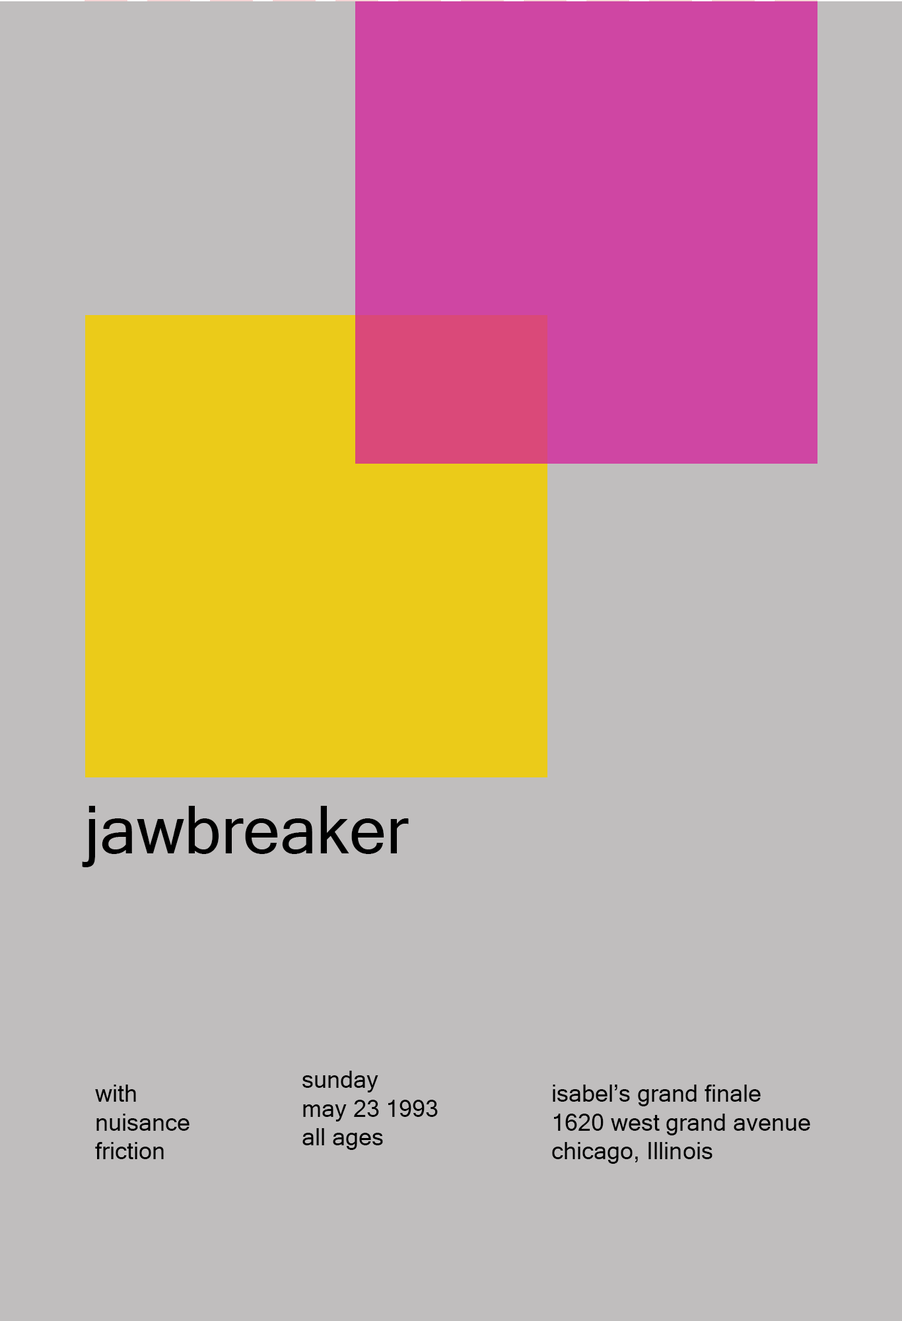
<style>
.page{position:relative;width:902px;height:1321px;background:#c0bebe}
.page>*{position:absolute;margin:0}
.t1{font:66.1px "MicrosoftSansSerif";color:#000000}
.t2{font:23.8px "MicrosoftSansSerif";color:#000000}
</style>
<div class="page">
<p class="t1" style="left:82px;top:806px;width:327px;height:61px">jawbreaker</p>
<p class="t2" style="left:303px;top:1071px;width:135px;height:79px">sunday<br>may 23 1993<br>all ages</p>
<p class="t2" style="left:95px;top:1085px;width:95px;height:74px">with <br>nuisance <br>friction</p>
<p class="t2" style="left:552px;top:1085px;width:259px;height:79px">isabel’s grand finale<br>1620 west grand avenue<br>chicago, Illinois</p>
</div>
